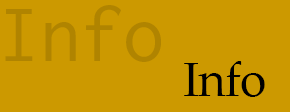
<style>
.page{position:relative;width:290px;height:112px;background:#cc9900}
.page>*{position:absolute;margin:0}
.t1{font:72px "InconsolataLGC";letter-spacing:-0.025em;color:#b08400}
.t2{font:48px "PalatinoLinotype-Roman";letter-spacing:-0.025em;color:#000000}
</style>
<div class="page">
<p class="t1" style="left:5px;top:5px;width:156px;height:57px">Info</p>
<p class="t2" style="left:184px;top:61px;width:81px;height:36px">Info</p>
</div>
